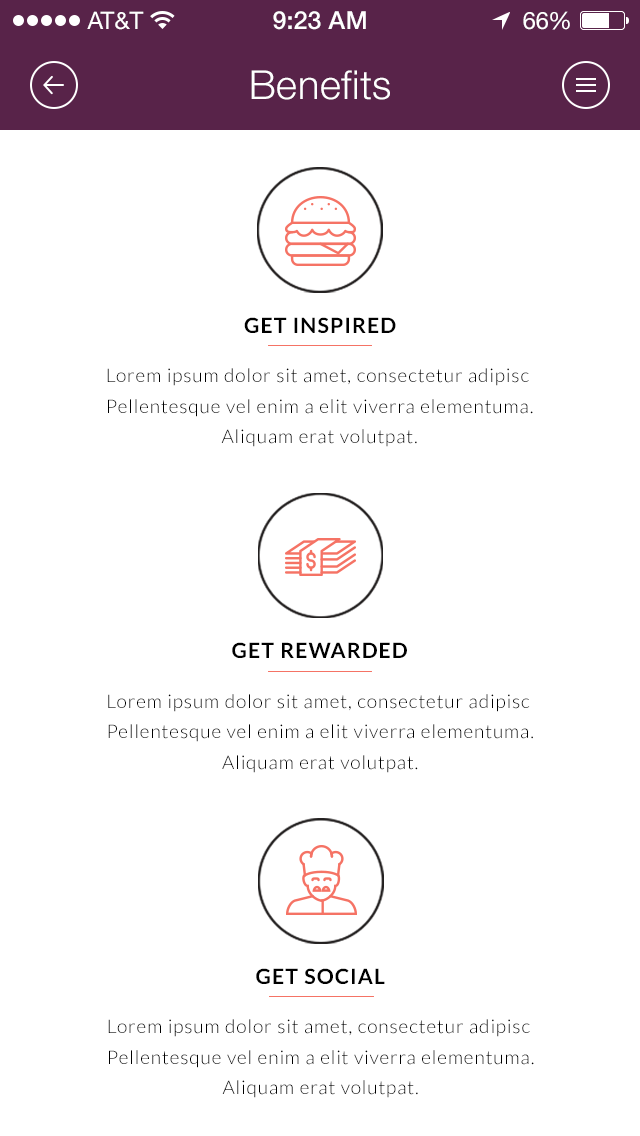
<style>
.page{position:relative;width:640px;height:1136px;background:#ffffff}
.page>*{position:absolute;margin:0}
.t1{font:24px "HelveticaNeue";color:#ffffff}
.t2{font:25px "HelveticaNeue-Medium";color:#ffffff}
.t3{font:24px "HelveticaNeue";letter-spacing:-0.02em;color:#ffffff}
.t4{font:40px "HelveticaNeue-Light";letter-spacing:0.025em;color:#ffffff}
.t5{font:21.2px "Lato-Bold";letter-spacing:0.05em;color:#000000}
.t6{font:18.9px/21.2px "Lato-Light";letter-spacing:0.05em;color:#000000}
</style>
<div class="page">
<p class="t1" style="left:87px;top:11px;width:57px;height:19px">AT&amp;T</p>
<p class="t2" style="left:273px;top:11px;width:93px;height:19px">9:23 AM</p>
<p class="t1" style="left:523px;top:11px;width:47px;height:19px">6<span class="t3">6</span>%</p>
<p class="t4" style="left:251px;top:70px;width:139px;height:30px">Benefits</p>
<p class="t5" style="left:244px;top:317px;width:152px;height:16px">GET INSPIRED</p>
<p class="t6" style="left:107px;top:368px;width:426px;height:79px;text-align:center">Lorem ipsum dolor sit amet, consectetur adipisc <br>Pellentesque vel enim a elit viverra elementuma.<br> Aliquam erat volutpat.</p>
<p class="t5" style="left:232px;top:642px;width:175px;height:16px">GET REWARDED</p>
<p class="t6" style="left:108px;top:694px;width:425px;height:79px;text-align:center">Lorem ipsum dolor sit amet, consectetur adipisc <br>Pellentesque vel enim a elit viverra elementuma.<br> Aliquam erat volutpat.</p>
<p class="t5" style="left:256px;top:968px;width:129px;height:16px">GET SOCIAL</p>
<p class="t6" style="left:108px;top:1019px;width:426px;height:79px;text-align:center">Lorem ipsum dolor sit amet, consectetur adipisc <br>Pellentesque vel enim a elit viverra elementuma.<br> Aliquam erat volutpat.</p>
</div>
